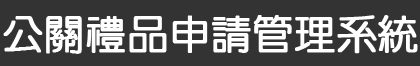
<style>
.page{position:relative;width:420px;height:66px;background:#333333}
.page>*{position:absolute;margin:0}
.t1{font:40.4px "DFYuan-W5-WIN-BF";color:#ffffff;font-weight:bold}
</style>
<div class="page">
<p class="t1" style="left:3px;top:15px;width:415px;height:39px">公關禮品申請管理系統</p>
</div>
